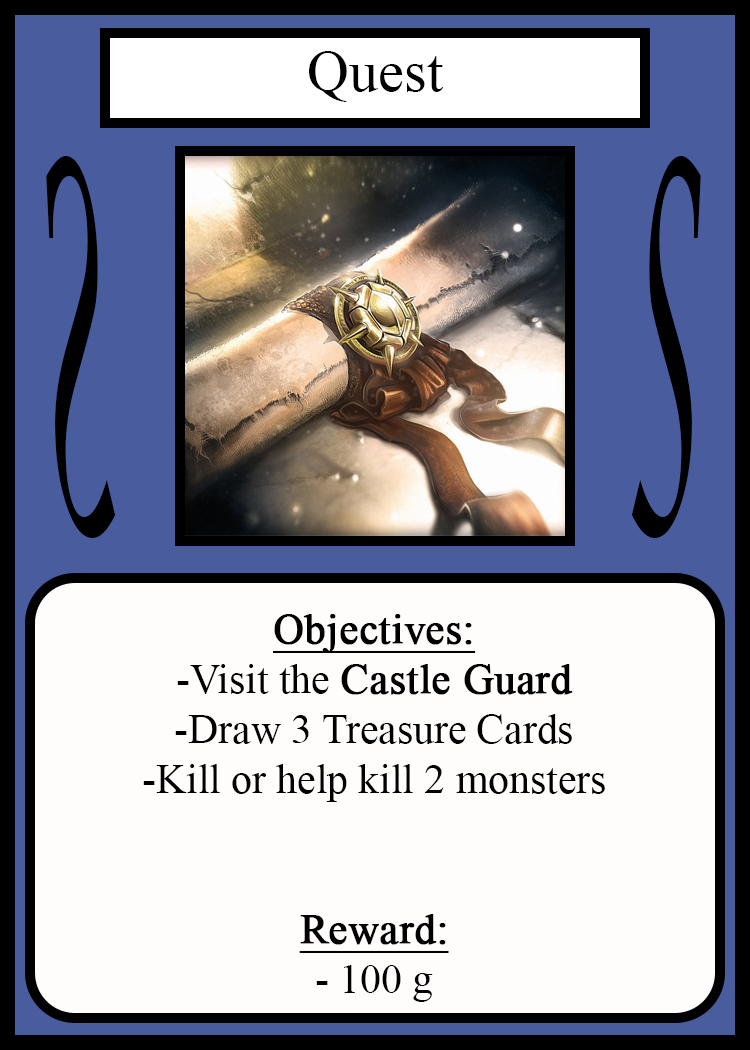
<style>
.page{position:relative;width:750px;height:1050px;background:#fffcfc}
.page>*{position:absolute;margin:0}
.t1{font:58.3px "TimesNewRomanPSMT";color:#010101}
.t2{font:504.3px "LucidaCalligraphy-Italic";color:#000000;scale:0.24 1}
.t3{font:504.1px "LucidaCalligraphy-Italic";color:#000000;scale:0.24 1}
.t4{font:41.7px "TimesNewRomanPSMT";color:#000000}
.t5{font:41.7px "TimesNewRomanPSMT";color:#000000;font-weight:bold;text-decoration:underline}
.t6{font:41.7px "TimesNewRomanPSMT";color:#000000;font-weight:bold}
</style>
<div class="page">
<p class="t1" style="left:309px;top:51px;width:135px;height:51px">Quest</p>
<p class="t2" style="left:46px;top:156px;width:70px;height:382px;rotate:180deg">S</p>
<p class="t3" style="left:631px;top:156px;width:70px;height:382px">S</p>
<p class="t4" style="left:143px;top:614px;width:462px;height:388px;text-align:center"><span class="t5">Objectives:<br></span>-Visit the <span class="t6">Castle Guard</span><br>-Draw 3 Treasure Cards<br>-Kill or help kill 2 monsters<br><br><br><span class="t5">Reward:</span><br>- 100 g</p>
</div>
